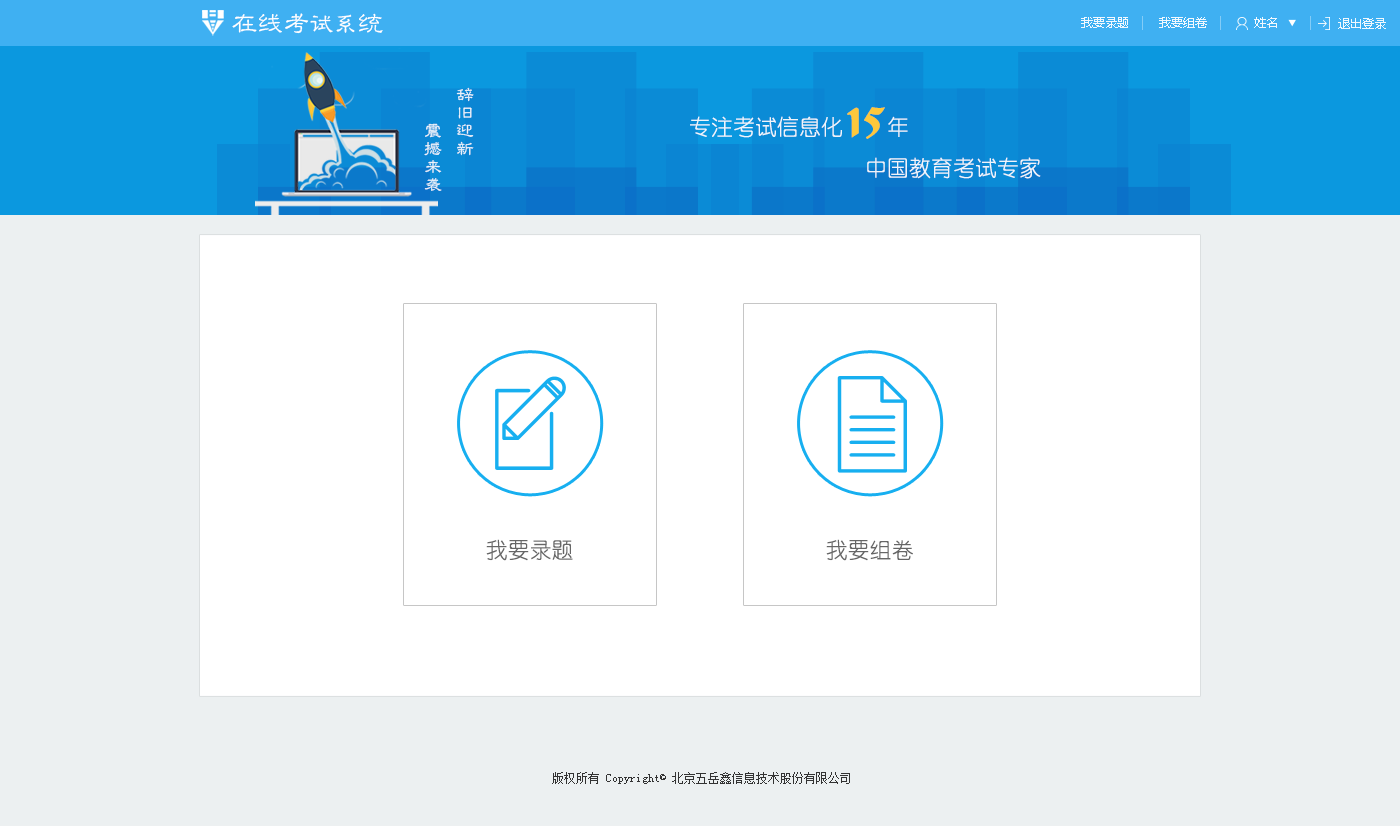
<style>
.page{position:relative;width:1400px;height:826px;background:#ffffff}
.page>*{position:absolute;margin:0}
.t1{font:26px "GBJenLei-Medium";color:#ffffff}
.t2{font:24px "GBJenLei-Medium";color:#ffffff}
.t3{font:12px "MicrosoftYaHei";color:#ffffff}
.t4{font:18px/32px "GBJenLei-Medium";color:#eff5fb}
.t5{font:48px "FormalScript421BT-Regular";color:#fdc83b}
.t6{font:22px "YouYuan";color:#ffffff}
.t7{font:22px "YouYuan";color:#666666}
.t8{font:12px "NSimSun";color:#333333}
</style>
<div class="page">
<p class="t1" style="left:232px;top:13px;width:151px;height:21px">在线考<span class="t2">试系</span>统</p>
<p class="t3" style="left:1081px;top:17px;width:47px;height:11px;opacity:0.9">我要录题</p>
<p class="t3" style="left:1159px;top:17px;width:48px;height:11px;opacity:0.9">我要组卷</p>
<p class="t3" style="left:1254px;top:17px;width:23px;height:11px;opacity:0.9">姓名</p>
<p class="t3" style="left:1338px;top:18px;width:48px;height:11px;opacity:0.9">退出登录</p>
<p class="t4" style="left:424px;top:87px;width:50px;height:104px">辞旧迎新<br>    震撼来袭</p>
<p class="t5" style="left:847px;top:107px;width:38px;height:32px">15</p>
<p class="t6" style="left:690px;top:116px;width:218px;height:22px;opacity:0.9">专注考试信息化    年</p>
<p class="t6" style="left:867px;top:157px;width:174px;height:22px;opacity:0.9">中国教育考试专家</p>
<p class="t7" style="left:486px;top:539px;width:87px;height:22px">我要录题</p>
<p class="t7" style="left:826px;top:539px;width:87px;height:22px">我要组卷</p>
<p class="t8" style="left:552px;top:772px;width:298px;height:12px">版权所有 Copyright© 北京五岳鑫信息技术股份有限公司</p>
</div>
